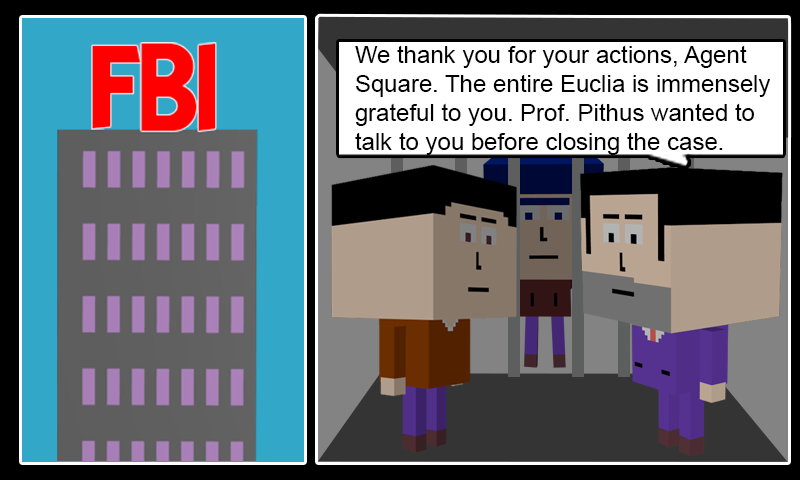
<style>
.page{position:relative;width:800px;height:480px}
.page>*{position:absolute;margin:0}
.t1{font:24px "ArialMT";color:#000000}
</style>
<div class="page">
<p class="t1" style="left:355px;top:45px;width:416px;height:110px">We thank you for your actions, Agent<br>Square. The entire Euclia is immensely<br>grateful to you. Prof. Pithus wanted to<br>talk to you before closing the case.</p>
</div>
